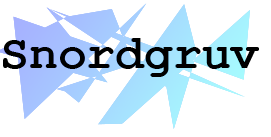
<style>
.page{position:relative;width:271px;height:137px;background:#ffffff}
.page>*{position:absolute;margin:0}
.t1{font:48px "CourierNewPS-BoldMT";color:#000000}
</style>
<div class="page">
<p class="t1" style="left:3px;top:38px;width:256px;height:39px">Snordgruv</p>
</div>
